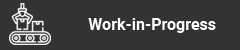
<style>
.page{position:relative;width:240px;height:50px;background:#333333}
.page>*{position:absolute;margin:0}
.t1{font:16px "Roboto-Bold";color:#ffffff}
</style>
<div class="page">
<p class="t1" style="left:88px;top:18px;width:128px;height:15px">Work-in-Progress</p>
</div>
